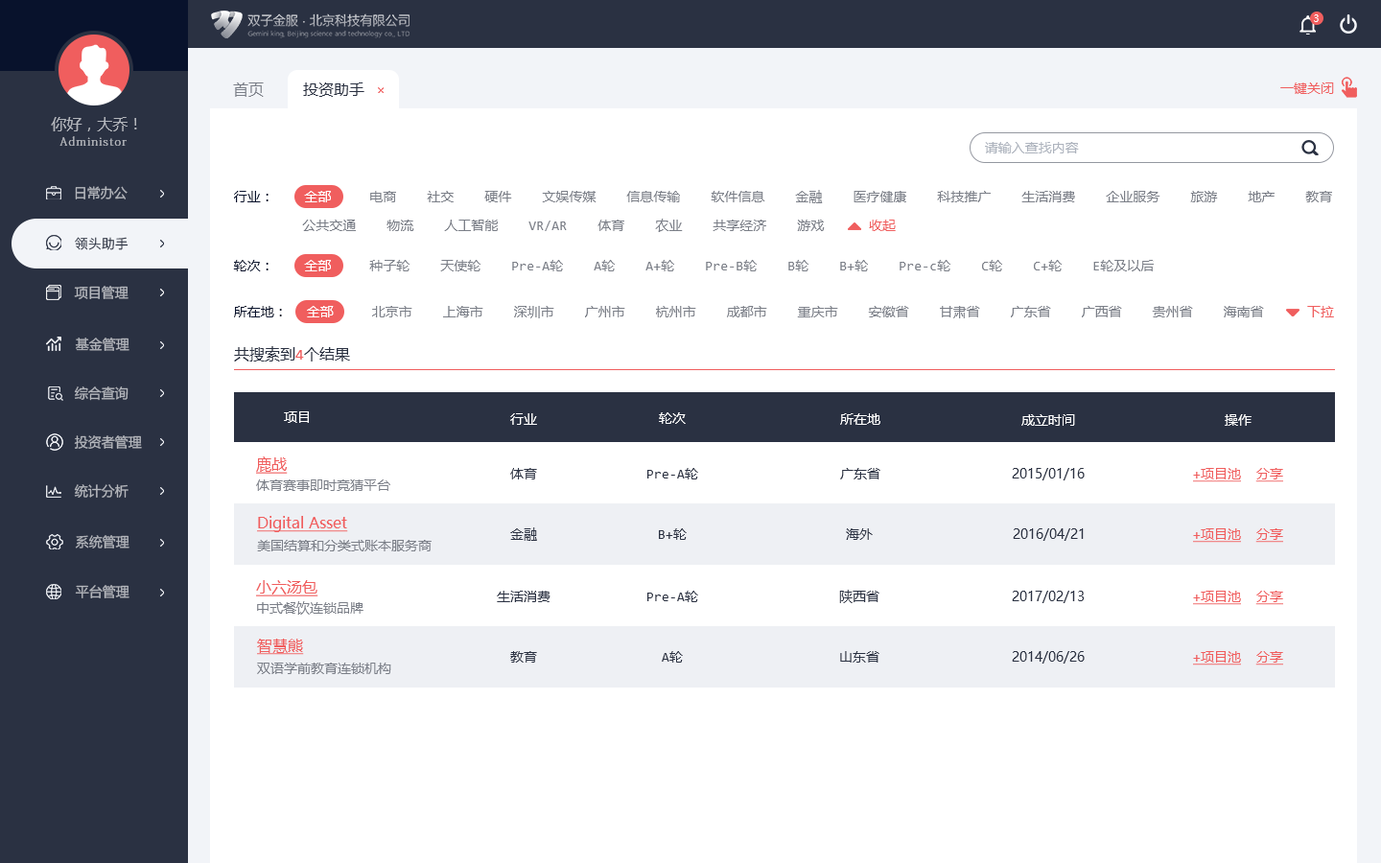
<style>
.page{position:relative;width:1381px;height:863px;background:#ffffff}
.page>*{position:absolute;margin:0}
.t1{font:9.6px "MicrosoftYaHeiUI";color:#ffffff}
.t2{font:15.3px "MicrosoftYaHeiMono";color:#7b7f88}
.t3{font:15.3px "MicrosoftYaHeiMono";color:#2a3142}
.t4{font:13.4px "MicrosoftYaHeiMono";color:#f05e5e}
.t5{font:15.3px "MicrosoftYaHeiMono";color:#b4b7bd}
.t6{font:11.5px "AdobeFangsongStd-Regular";letter-spacing:0.1em;color:#b4b7bd}
.t7{font:13.4px "MicrosoftYaHeiUI";color:#adb3bd}
.t8{font:13.4px "MicrosoftYaHeiUI";color:#b4b7bd}
.t9{font:13.4px/28.8px "MicrosoftYaHeiMono";color:#7b7f88}
.t10{font:13.4px/28.8px "MicrosoftYaHeiMono";color:#08122c}
.t11{font:13.4px/28.8px "MicrosoftYaHeiMono";color:#ffffff}
.t12{font:13.4px "PingFang-SC-Medium";color:#2a3142}
.t13{font:13.4px "MicrosoftYaHeiMono";color:#7b7f88}
.t14{font:13.4px "MicrosoftYaHeiMono";color:#08122c}
.t15{font:13.4px "MicrosoftYaHeiMono";color:#ffffff}
.t16{font:15.3px "MicrosoftYaHeiMono";color:#f05e5e}
.t17{font:15.3px "MicrosoftYaHeiMono";color:#f05e5e;text-decoration:underline}
.t18{font:13.4px "MicrosoftYaHeiMono";color:#2a3142}
.t19{font:13.4px "MicrosoftYaHeiUI";color:#2a3142}
.t20{font:13.4px "MicrosoftYaHeiMono";color:#f05e5e;text-decoration:underline}
.t21{font:15.3px "MicrosoftYaHeiUI";color:#f05e5e;text-decoration:underline}
.t22{font:13.4px "MicrosoftYaHeiUI";color:#7b7f88}
</style>
<div class="page">
<p class="t1" style="left:1314px;top:14px;width:5px;height:8px">3</p>
<p class="t2" style="left:233px;top:82px;width:31px;height:15px">首页</p>
<p class="t3" style="left:303px;top:82px;width:62px;height:15px">投资助手</p>
<p class="t4" style="left:1281px;top:82px;width:53px;height:12px">一键关闭</p>
<p class="t5" style="left:51px;top:117px;width:86px;height:14px">你好，大乔！</p>
<p class="t6" style="left:59px;top:136px;width:68px;height:10px">Administor</p>
<p class="t7" style="left:985px;top:142px;width:94px;height:11px">请输入查找内容</p>
<p class="t8" style="left:75px;top:186px;width:53px;height:14px">日常办公</p>
<p class="t9" style="left:234px;top:190px;width:1098px;height:42px"><span class="t10">行业：    </span><span class="t11">全部     </span>电商    社交    硬件    文娱传媒    信息传输    软件信息    金融    医疗健康    科技推广    生活消费    企业服务    旅游    地产    教育<br>         公共交通    物流    人工智能    VR/AR    体育    农业    共享经济    游戏</p>
<p class="t4" style="left:869px;top:220px;width:27px;height:11px">收起</p>
<p class="t12" style="left:75px;top:237px;width:54px;height:13px">领头助手</p>
<p class="t13" style="left:233px;top:260px;width:921px;height:11px"><span class="t14">轮次：    </span><span class="t15">全部     </span>种子轮    天使轮    Pre-A轮    A轮    A+轮    Pre-B轮    B轮    B+轮    Pre-c轮    C轮    C+轮    E轮及以后</p>
<p class="t8" style="left:74px;top:286px;width:55px;height:14px">项目管理</p>
<p class="t13" style="left:234px;top:306px;width:1030px;height:12px"><span class="t14">所在地：  </span><span class="t15">全部     </span>北京市    上海市    深圳市    广州市    杭州市    成都市    重庆市    安徽省    甘肃省    广东省    广西省    贵州省    海南省</p>
<p class="t4" style="left:1307px;top:306px;width:27px;height:11px">下拉</p>
<p class="t8" style="left:75px;top:338px;width:54px;height:13px">基金管理</p>
<p class="t3" style="left:234px;top:346px;width:116px;height:16px">共搜索到<span class="t16">4</span>个结果</p>
<p class="t8" style="left:74px;top:387px;width:55px;height:14px">综合查询</p>
<p class="t15" style="left:284px;top:412px;width:25px;height:11px">项目</p>
<p class="t15" style="left:510px;top:413px;width:27px;height:12px">行业</p>
<p class="t15" style="left:659px;top:412px;width:27px;height:12px">轮次</p>
<p class="t15" style="left:840px;top:413px;width:41px;height:12px">所在地</p>
<p class="t15" style="left:1022px;top:414px;width:53px;height:12px">成立时间</p>
<p class="t15" style="left:1225px;top:414px;width:27px;height:12px">操作</p>
<p class="t8" style="left:74px;top:435px;width:68px;height:14px">投资者管理</p>
<p class="t17" style="left:256px;top:457px;width:32px;height:17px">鹿战</p>
<p class="t18" style="left:510px;top:468px;width:27px;height:12px">体育</p>
<p class="t18" style="left:647px;top:468px;width:51px;height:12px">Pre-A轮</p>
<p class="t18" style="left:840px;top:468px;width:41px;height:12px">广东省</p>
<p class="t19" style="left:1012px;top:468px;width:73px;height:13px">2015/01/16</p>
<p class="t20" style="left:1193px;top:468px;width:90px;height:14px">+项目池  分享</p>
<p class="t8" style="left:74px;top:484px;width:55px;height:14px">统计分析</p>
<p class="t13" style="left:256px;top:480px;width:134px;height:11px">体育赛事即时竞猜平台</p>
<p class="t21" style="left:257px;top:516px;width:91px;height:16px">Digital Asset</p>
<p class="t18" style="left:510px;top:528px;width:27px;height:13px">金融</p>
<p class="t18" style="left:659px;top:529px;width:28px;height:11px">B+轮</p>
<p class="t19" style="left:846px;top:529px;width:27px;height:11px">海外</p>
<p class="t19" style="left:1013px;top:529px;width:71px;height:12px">2016/04/21</p>
<p class="t20" style="left:1193px;top:529px;width:90px;height:14px">+项目池  分享</p>
<p class="t8" style="left:75px;top:535px;width:54px;height:14px">系统管理</p>
<p class="t22" style="left:257px;top:540px;width:175px;height:12px">美国结算和分类式账本服务商</p>
<p class="t17" style="left:256px;top:580px;width:62px;height:17px">小六汤包</p>
<p class="t8" style="left:75px;top:585px;width:54px;height:14px">平台管理</p>
<p class="t18" style="left:497px;top:591px;width:54px;height:11px">生活消费</p>
<p class="t18" style="left:647px;top:591px;width:51px;height:11px">Pre-A轮</p>
<p class="t18" style="left:839px;top:590px;width:41px;height:13px">陕西省</p>
<p class="t19" style="left:1012px;top:591px;width:73px;height:12px">2017/02/13</p>
<p class="t20" style="left:1193px;top:591px;width:90px;height:14px">+项目池  分享</p>
<p class="t13" style="left:257px;top:601px;width:107px;height:14px">中式餐饮连锁品牌</p>
<p class="t21" style="left:257px;top:639px;width:47px;height:16px">智慧熊</p>
<p class="t18" style="left:510px;top:651px;width:27px;height:12px">教育</p>
<p class="t18" style="left:662px;top:651px;width:21px;height:12px">A轮</p>
<p class="t19" style="left:840px;top:651px;width:40px;height:12px">山东省</p>
<p class="t19" style="left:1012px;top:651px;width:73px;height:13px">2014/06/26</p>
<p class="t20" style="left:1193px;top:651px;width:90px;height:15px">+项目池  分享</p>
<p class="t22" style="left:257px;top:663px;width:134px;height:11px">双语学前教育连锁机构</p>
</div>
